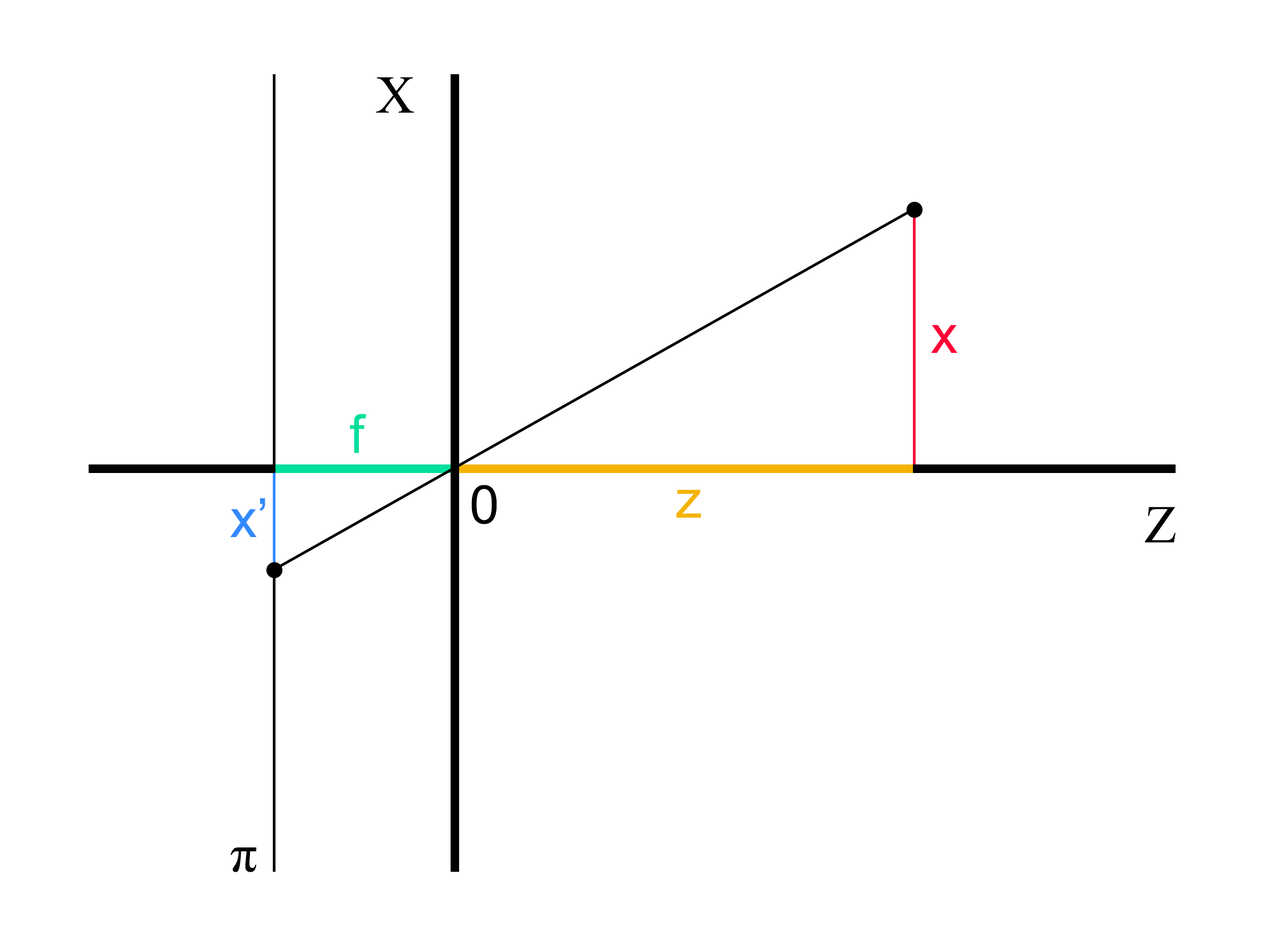
<style>
.page{position:relative;width:1261px;height:946px;background:#ffffff}
.page>*{position:absolute;margin:0}
.t1{font:53.4px "TimesNewRomanPSMT";color:#000000}
.t2{font:53.4px "ArialMT";color:#ff0036}
.t3{font:53.4px "ArialMT";color:#00de9d}
.t4{font:53.4px "ArialMT";color:#000000}
.t5{font:53.4px "ArialMT";color:#3289ff}
.t6{font:53.4px "ArialMT";color:#f5b300}
</style>
<div class="page">
<p class="t1" style="left:376px;top:77px;width:38px;height:36px">X</p>
<p class="t2" style="left:931px;top:325px;width:26px;height:28px">x</p>
<p class="t3" style="left:350px;top:414px;width:16px;height:39px">f</p>
<p class="t4" style="left:471px;top:485px;width:26px;height:39px">0</p>
<p class="t5" style="left:230px;top:498px;width:35px;height:39px">x’</p>
<p class="t6" style="left:676px;top:489px;width:25px;height:29px">z</p>
<p class="t1" style="left:1144px;top:507px;width:31px;height:35px">Z</p>
<p class="t1" style="left:230px;top:847px;width:26px;height:25px">π</p>
</div>
